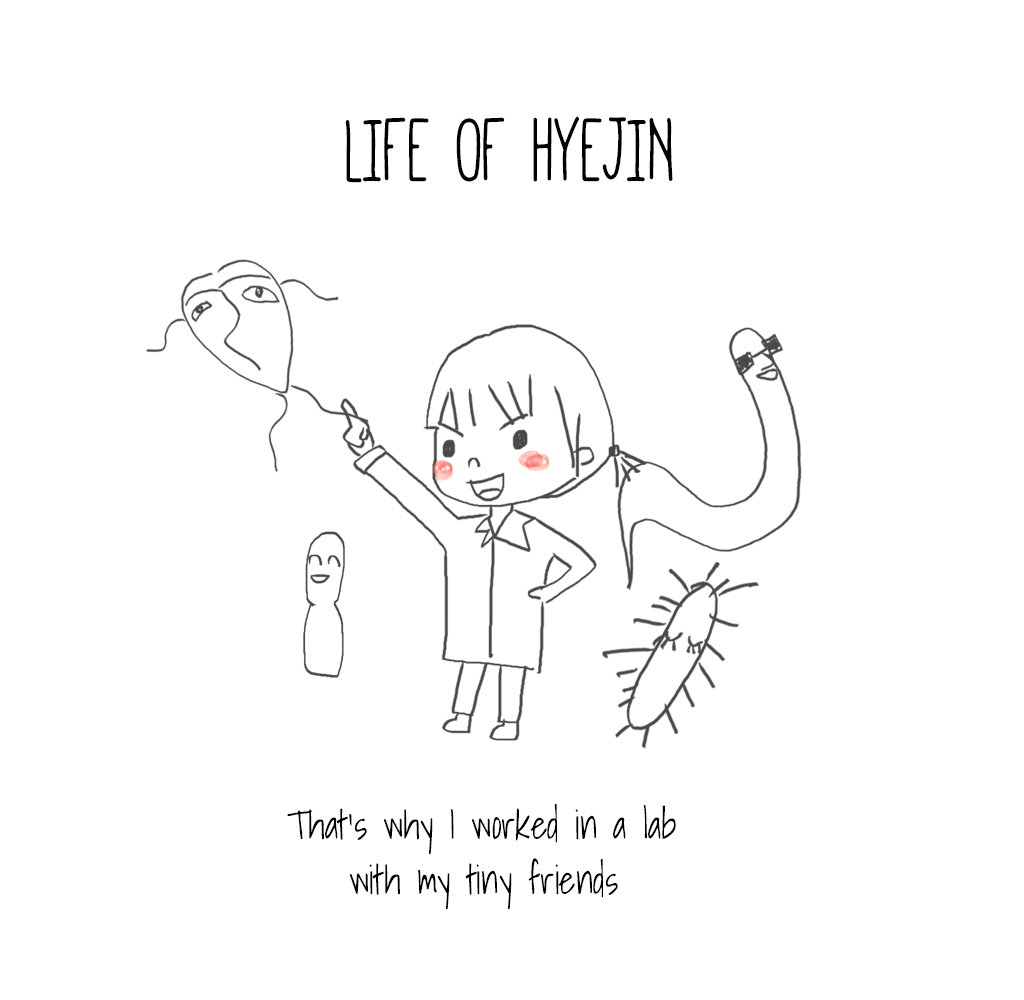
<style>
.page{position:relative;width:1024px;height:1000px;background:#ffffff}
.page>*{position:absolute;margin:0}
.t1{font:100px "Mathlete-Bulky";color:#000000;scale:0.9 1}
.t2{font:40px "ShadowsIntoLight";color:#000000;scale:0.9 1}
</style>
<div class="page">
<p class="t1" style="left:345px;top:116px;width:328px;height:67px">LIFE OF HYEJIN</p>
<p class="t2" style="left:287px;top:804px;width:389px;height:50px">That’s why I worked in a lab</p>
<p class="t2" style="left:350px;top:858px;width:268px;height:51px">with my tiny friends</p>
</div>
